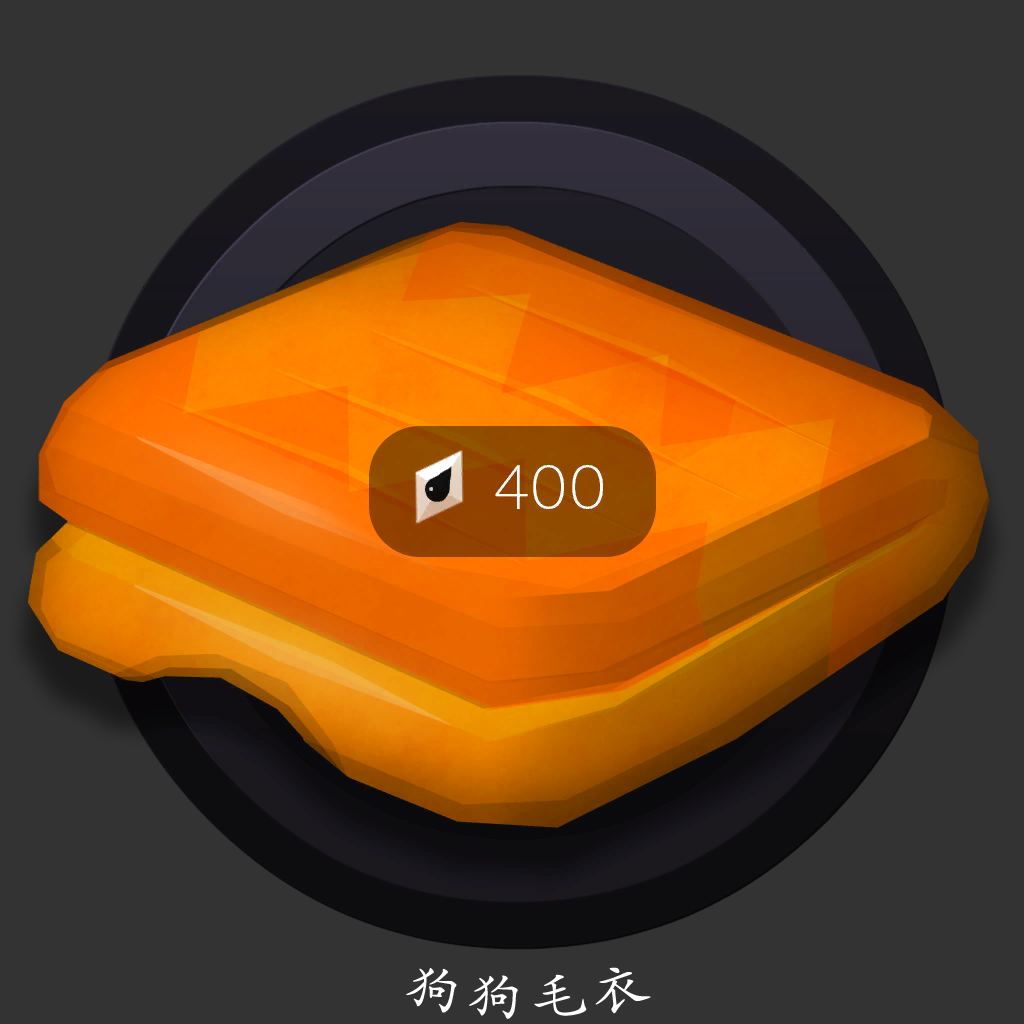
<style>
.page{position:relative;width:1024px;height:1024px;background:#333333}
.page>*{position:absolute;margin:0}
.t1{font:53.3px "STKaiti";letter-spacing:0.1em;color:#ffffff}
</style>
<div class="page">
<p class="t1" style="left:406px;top:967px;width:245px;height:52px">狗狗毛衣</p>
</div>
